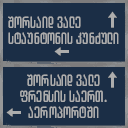
<style>
.page{position:relative;width:128px;height:128px;background:#1b2e46}
.page>*{position:absolute;margin:0}
.t1{font:16.2px "ArchyEDT-Bold";letter-spacing:0.02em;color:#adadad;scale:0.8 1}
</style>
<div class="page">
<p class="t1" style="left:8px;top:16px;width:73px;height:12px">შორსაიდ ვალე</p>
<p class="t1" style="left:8px;top:32px;width:111px;height:12px">სტაუნტონის კუნძული</p>
<p class="t1" style="left:27px;top:74px;width:73px;height:12px">შორსაიდ ვალე</p>
<p class="t1" style="left:20px;top:90px;width:87px;height:28px;text-align:center">ფრენსის საერთ.<br>აეროპორტში</p>
</div>
